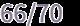
<style>
.page{position:relative;width:80px;height:26px;background:#000000}
.page>*{position:absolute;margin:0}
.t1{font:24px "WebPSD-18463539-0-Regular";color:#837a91;font-weight:bold}
</style>
<div class="page">
<p class="t1" style="left:0px;top:0px;width:80px;height:26px">66/70</p>
</div>
